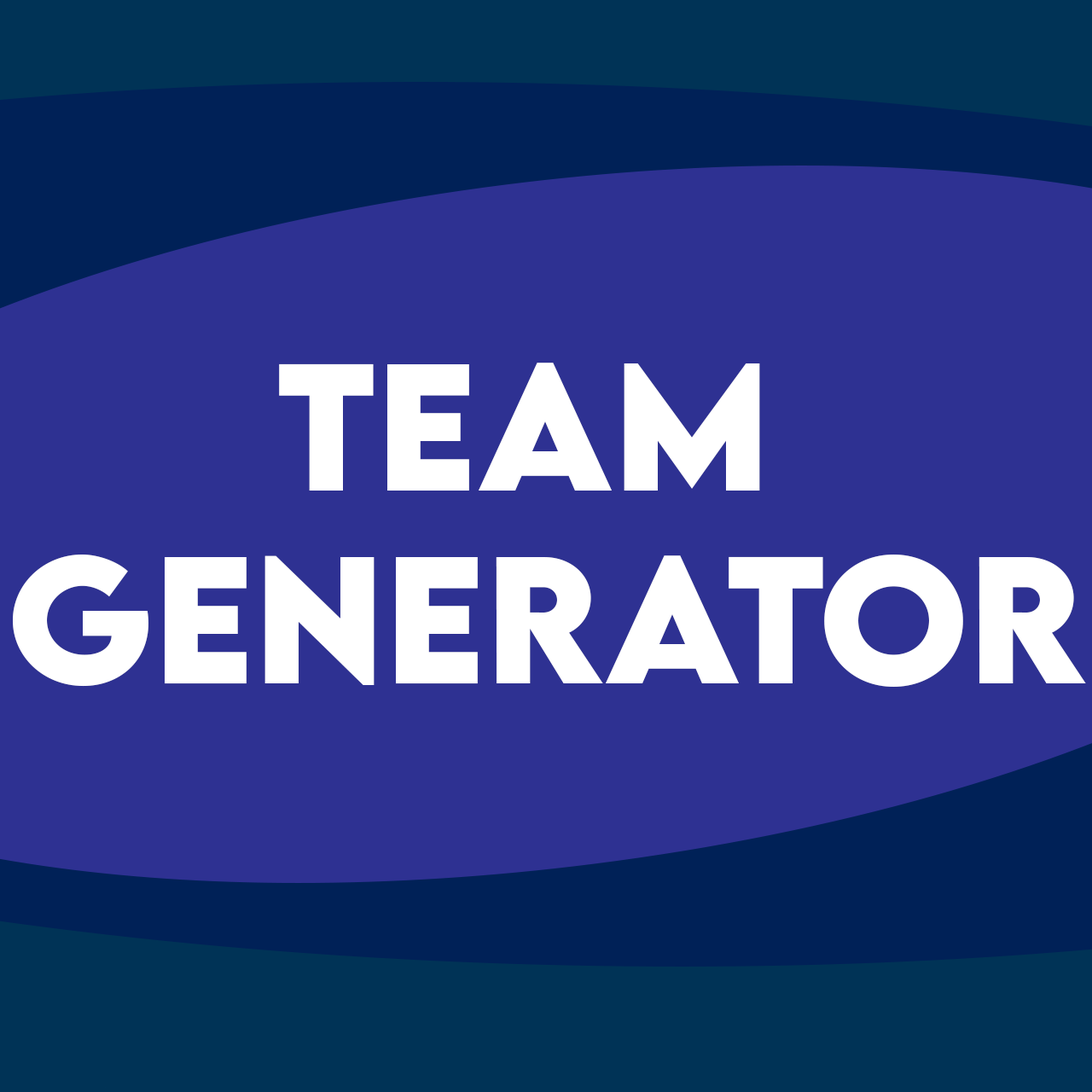
<style>
.page{position:relative;width:1092px;height:1092px;background:#2e3192}
.page>*{position:absolute;margin:0}
.t1{font:160.2px "LEMONMILK-Bold";color:#ffffff}
</style>
<div class="page">
<p class="t1" style="left:13px;top:363px;width:1073px;height:324px;text-align:center">Team <br>Generator</p>
</div>
